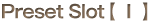
<style>
.page{position:relative;width:150px;height:23px;background:#ffffff}
.page>*{position:absolute;margin:0}
.t1{font:18px "GothicMB101Pro-DeBold";letter-spacing:-0.04em}
.t2{font:18px "GothicMB101Pro-DeBold";letter-spacing:-0.04em;color:#8b6e51}
</style>
<div class="page">
<p class="t1" style="left:2px;top:2px;width:146px;height:19px">Preset Slot【     】</p>
<p class="t2" style="left:127px;top:4px;width:4px;height:15px;opacity:0.9">I</p>
</div>
